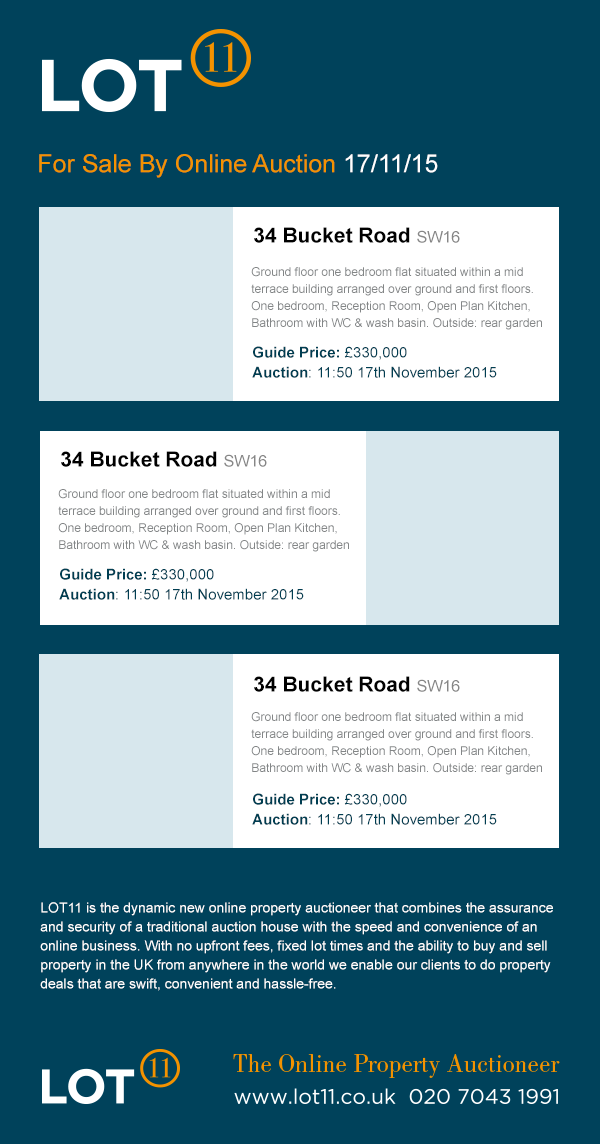
<style>
.page{position:relative;width:600px;height:1144px;background:#00425b}
.page>*{position:absolute;margin:0}
.t1{font:25px "ArialMT";color:#f39200}
.t2{font:25px "ArialMT";color:#ffffff}
.t3{font:21px "Arial-BoldMT";color:#000000}
.t4{font:16px "ArialMT";color:#868686}
.t5{font:12px/17px "ArialMT";color:#838687}
.t6{font:15px/20px "ArialMT";color:#003e52}
.t7{font:15px/20px "Arial-BoldMT";color:#003e52}
.t8{font:14px/19px "ArialMT";color:#feffff}
</style>
<div class="page">
<p class="t1" style="left:39px;top:154px;width:399px;height:24px">For Sale By Online Auction <span class="t2">17/11/15</span></p>
<p class="t3" style="left:254px;top:227px;width:206px;height:16px">34 Bucket Road <span class="t4">SW16</span></p>
<p class="t5" style="left:251px;top:267px;width:291px;height:63px">Ground floor one bedroom flat situated within a mid terrace building arranged over ground and first floors. One bedroom, Reception Room, Open Plan Kitchen, Bathroom with WC &amp; wash basin. Outside: rear garden</p>
<p class="t6" style="left:252px;top:346px;width:245px;height:32px"><span class="t7">Guide Price:</span> £330,000<br><span class="t7">Auction</span>: 11:50 17th November 2015</p>
<p class="t3" style="left:61px;top:451px;width:206px;height:16px">34 Bucket Road <span class="t4">SW16</span></p>
<p class="t5" style="left:58px;top:489px;width:291px;height:63px">Ground floor one bedroom flat situated within a mid terrace building arranged over ground and first floors. One bedroom, Reception Room, Open Plan Kitchen, Bathroom with WC &amp; wash basin. Outside: rear garden</p>
<p class="t6" style="left:59px;top:568px;width:245px;height:32px"><span class="t7">Guide Price:</span> £330,000<br><span class="t7">Auction</span>: 11:50 17th November 2015</p>
<p class="t3" style="left:254px;top:676px;width:206px;height:16px">34 Bucket Road <span class="t4">SW16</span></p>
<p class="t5" style="left:251px;top:712px;width:291px;height:63px">Ground floor one bedroom flat situated within a mid terrace building arranged over ground and first floors. One bedroom, Reception Room, Open Plan Kitchen, Bathroom with WC &amp; wash basin. Outside: rear garden</p>
<p class="t6" style="left:252px;top:793px;width:245px;height:32px"><span class="t7">Guide Price:</span> £330,000<br><span class="t7">Auction</span>: 11:50 17th November 2015</p>
<p class="t8" style="left:40px;top:902px;width:513px;height:89px">LOT11 is the dynamic new online property auctioneer that combines the assurance and security of a traditional auction house with the speed and convenience of an online business. With no upfront fees, fixed lot times and the ability to buy and sell property in the UK from anywhere in the world we enable our clients to do property deals that are swift, convenient and hassle-free.</p>
</div>
